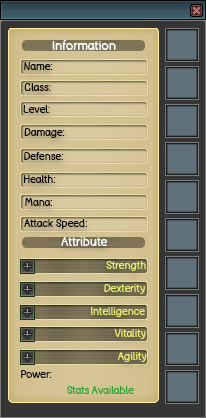
<style>
.page{position:relative;width:206px;height:418px}
.page>*{position:absolute;margin:0}
.t1{font:12px "BadComic";color:#ffffff}
.t2{font:10px "BadComic";color:#000000}
.t3{font:12px "BadComic";color:#ffffff;scale:0.95 1}
.t4{font:10px "BadComic";color:#e6ed70}
.t5{font:10px "BadComic";color:#2ba033}
</style>
<div class="page">
<p class="t1" style="left:52px;top:40px;width:64px;height:10px">Information</p>
<p class="t2" style="left:24px;top:62px;width:29px;height:8px">Name:</p>
<p class="t2" style="left:24px;top:83px;width:27px;height:8px">Class:</p>
<p class="t2" style="left:23px;top:105px;width:27px;height:8px">Level:</p>
<p class="t2" style="left:24px;top:128px;width:41px;height:10px">Damage:</p>
<p class="t2" style="left:24px;top:152px;width:39px;height:8px">Defense:</p>
<p class="t2" style="left:23px;top:175px;width:33px;height:8px">Health:</p>
<p class="t2" style="left:25px;top:198px;width:27px;height:8px">Mana:</p>
<p class="t2" style="left:24px;top:219px;width:63px;height:10px">Attack Speed:</p>
<p class="t3" style="left:61px;top:237px;width:47px;height:9px">Attribute</p>
<p class="t4" style="left:106px;top:261px;width:40px;height:10px">Strength</p>
<p class="t4" style="left:104px;top:284px;width:41px;height:10px">Dexterity</p>
<p class="t4" style="left:91px;top:307px;width:54px;height:10px">Intelligence</p>
<p class="t4" style="left:114px;top:329px;width:32px;height:10px">Vitality</p>
<p class="t4" style="left:117px;top:352px;width:30px;height:10px">Agility</p>
<p class="t2" style="left:21px;top:370px;width:31px;height:8px">Power:</p>
<p class="t5" style="left:66px;top:386px;width:68px;height:8px">Stats Available</p>
</div>
